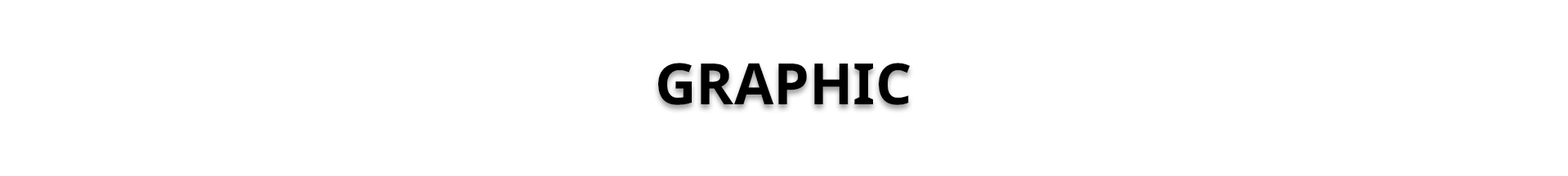
<style>
.page{position:relative;width:1568px;height:176px;background:#ffffff}
.page>*{position:absolute;margin:0}
.t1{font:57.2px "NotoSans-Bold";color:#000000}
</style>
<div class="page">
<p class="t1" style="left:658px;top:63px;width:253px;height:42px">GRAPHIC</p>
</div>
